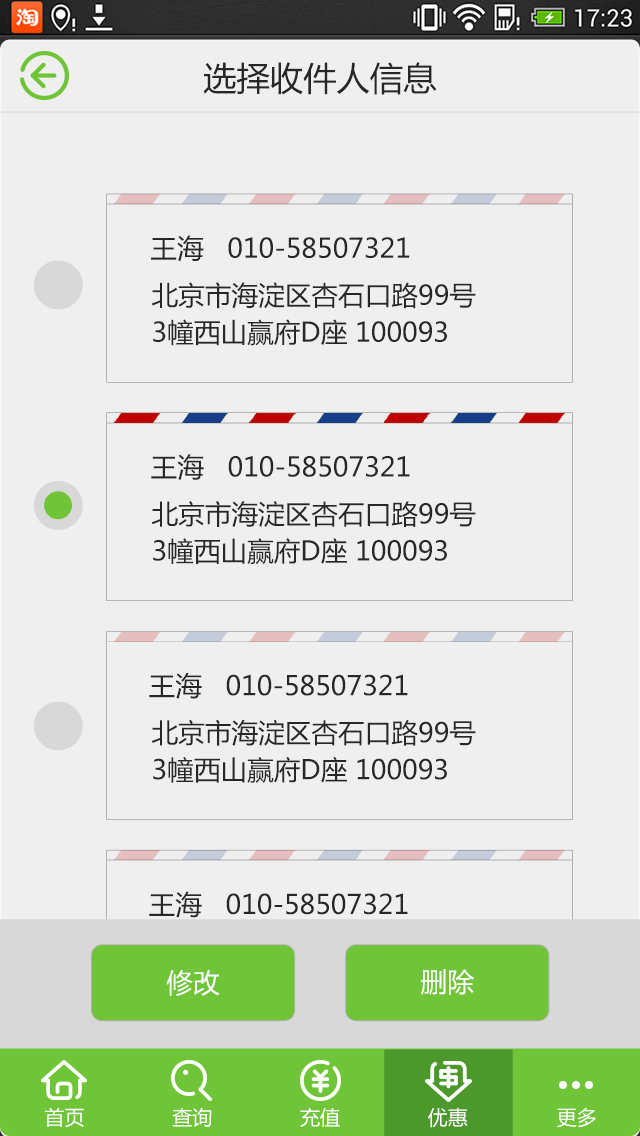
<style>
.page{position:relative;width:640px;height:1136px;background:#efefef}
.page>*{position:absolute;margin:0}
.t1{font:33.3px "MicrosoftYaHei";color:#272727}
.t2{font:26.7px "MicrosoftYaHei";color:#272727}
.t3{font:26.7px/37px "MicrosoftYaHei";color:#272727}
.t4{font:26.7px "MicrosoftYaHei";color:#ffffff}
.t5{font:20px "MicrosoftYaHei";color:#ffffff}
</style>
<div class="page">
<p class="t1" style="left:203px;top:62px;width:234px;height:33px">选择收件人信息</p>
<p class="t2" style="left:151px;top:235px;width:259px;height:27px">王海   010-58507321</p>
<p class="t3" style="left:152px;top:282px;width:324px;height:64px">北京市海淀区杏石口路99号<br>3幢西山赢府D座 100093</p>
<p class="t2" style="left:151px;top:454px;width:259px;height:26px">王海   010-58507321</p>
<p class="t3" style="left:152px;top:501px;width:324px;height:64px">北京市海淀区杏石口路99号<br>3幢西山赢府D座 100093</p>
<p class="t2" style="left:149px;top:673px;width:259px;height:26px">王海   010-58507321</p>
<p class="t3" style="left:152px;top:719px;width:324px;height:64px">北京市海淀区杏石口路99号<br>3幢西山赢府D座 100093</p>
<p class="t2" style="left:149px;top:891px;width:259px;height:27px">王海   010-58507321</p>
<p class="t4" style="left:166px;top:970px;width:54px;height:26px">修改</p>
<p class="t4" style="left:420px;top:969px;width:54px;height:26px">删除</p>
<p class="t5" style="left:45px;top:1107px;width:39px;height:21px">首页</p>
<p class="t5" style="left:172px;top:1107px;width:40px;height:20px">查询</p>
<p class="t5" style="left:300px;top:1107px;width:40px;height:20px">充值</p>
<p class="t5" style="left:428px;top:1107px;width:40px;height:21px">优惠</p>
<p class="t5" style="left:557px;top:1108px;width:39px;height:20px">更多</p>
</div>
